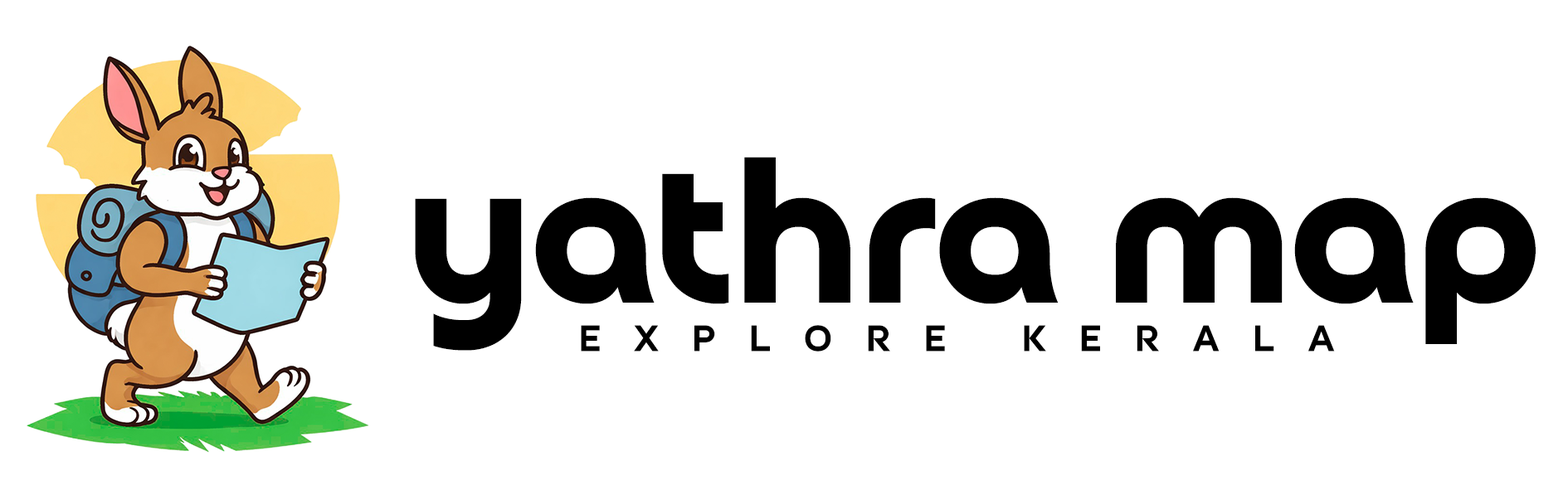
<style>
.page{position:relative;width:1568px;height:490px;background:#ffffff}
.page>*{position:absolute;margin:0}
.t1{font:207.4px "FONTSPRINGDEMO-Croogla4FBold";color:#000000}
.t2{font:41.5px "FONTSPRINGDEMO-Croogla4FRegular";letter-spacing:0.8em;color:#000000}
</style>
<div class="page">
<p class="t1" style="left:415px;top:157px;width:1121px;height:194px">yathra map</p>
<p class="t2" style="left:581px;top:325px;width:754px;height:27px">EXPLORE KERALA</p>
</div>
